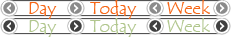
<style>
.page{position:relative;width:231px;height:37px;background:#ffffff}
.page>*{position:absolute;margin:0}
.t1{font:18px "TempusSansITC";color:#f66818}
.t2{font:18px "TempusSansITC";color:#b2c78f}
</style>
<div class="page">
<p class="t1" style="left:29px;top:2px;width:28px;height:17px">Day</p>
<p class="t1" style="left:90px;top:0px;width:47px;height:19px">Today</p>
<p class="t1" style="left:167px;top:0px;width:43px;height:14px">Week</p>
<p class="t2" style="left:29px;top:20px;width:28px;height:17px">Day</p>
<p class="t2" style="left:90px;top:18px;width:47px;height:19px">Today</p>
<p class="t2" style="left:167px;top:18px;width:43px;height:14px">Week</p>
</div>
